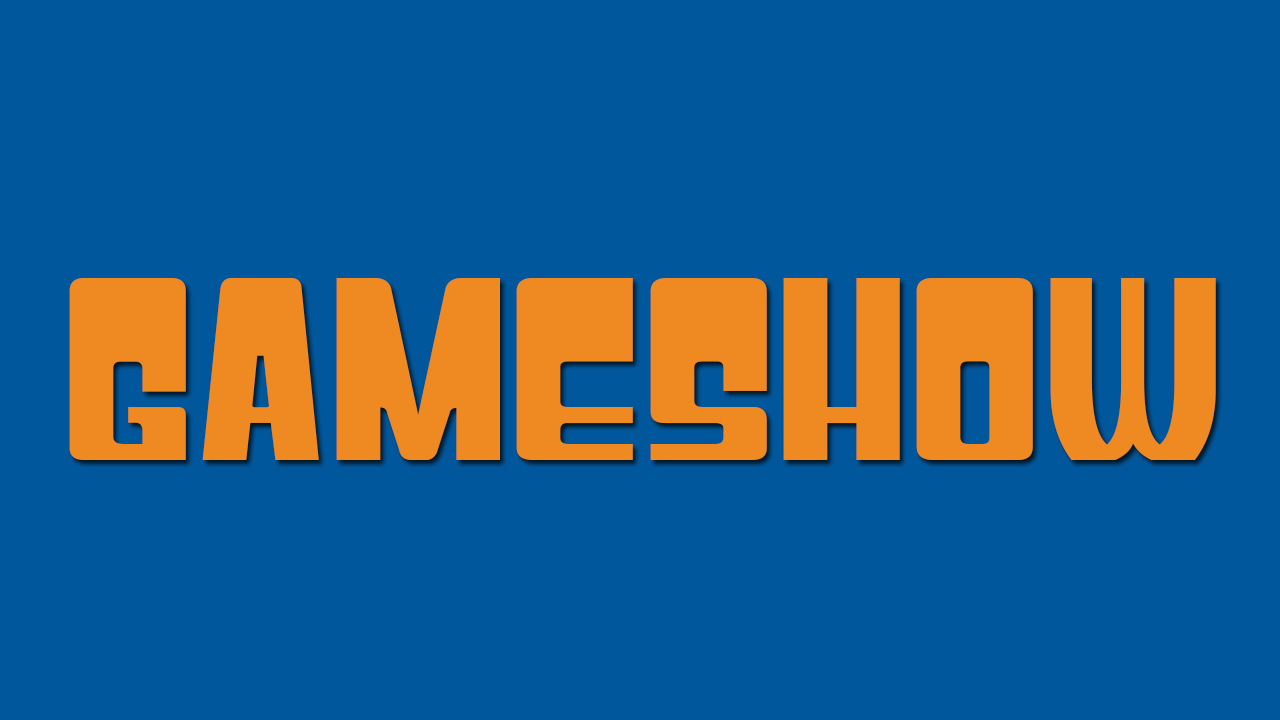
<style>
.page{position:relative;width:1280px;height:720px;background:#01579b}
.page>*{position:absolute;margin:0}
.t1{font:234.6px "Gyparody";color:#ef8a23;scale:1.24 1}
</style>
<div class="page">
<p class="t1" style="left:69px;top:278px;width:1147px;height:182px">GAMESHOW</p>
</div>
